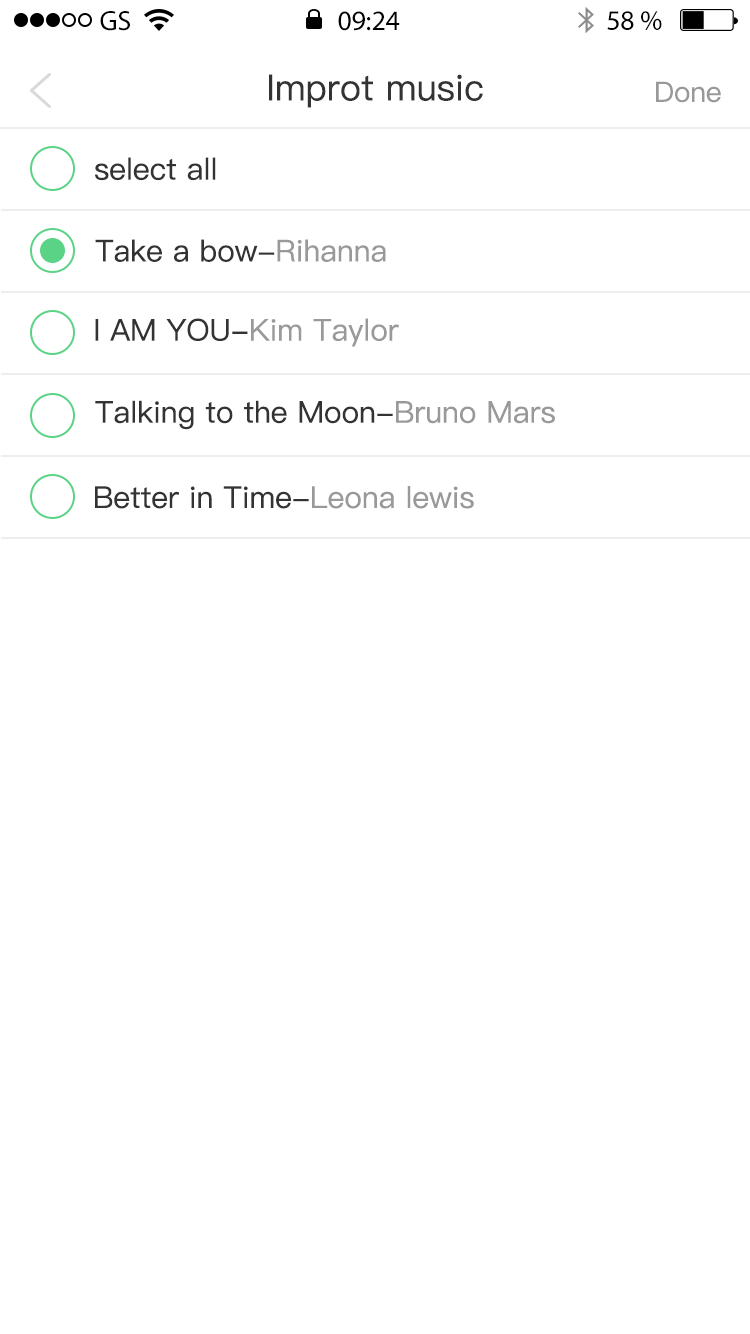
<style>
.page{position:relative;width:750px;height:1334px;background:#ffffff}
.page>*{position:absolute;margin:0}
.t1{font:28px "MyriadPro-Regular";color:#010101}
.t2{font:28px "MyriadPro-Regular";color:#000000}
.t3{font:36px "PingFangSC-Regular";color:#333333}
.t4{font:36px "PingFangSC-Regular";color:#333333;text-transform:uppercase}
.t5{font:28px "PingFangSC-Regular";color:#999999}
.t6{font:28px "PingFangSC-Regular";color:#999999;text-transform:uppercase}
.t7{font:30px "PingFangSC-Regular";color:#333333}
.t8{font:30px "PingFangSC-Regular";color:#333333;text-transform:uppercase}
.t9{font:30px "PingFangSC-Regular";color:#999999;text-transform:uppercase}
.t10{font:30px "PingFangSC-Regular";color:#999999}
</style>
<div class="page">
<p class="t1" style="left:100px;top:11px;width:30px;height:20px">GS</p>
<p class="t2" style="left:338px;top:11px;width:62px;height:20px">09:24</p>
<p class="t1" style="left:607px;top:11px;width:55px;height:19px">58 %</p>
<p class="t3" style="left:269px;top:74px;width:214px;height:34px"><span class="t4">i</span>mprot music</p>
<p class="t5" style="left:656px;top:81px;width:65px;height:22px"><span class="t6">d</span>one</p>
<p class="t7" style="left:95px;top:157px;width:121px;height:24px">select all</p>
<p class="t7" style="left:95px;top:239px;width:291px;height:23px"><span class="t8">t</span>ake a bow-<span class="t9">r</span><span class="t10">ihanna</span></p>
<p class="t8" style="left:95px;top:318px;width:304px;height:29px">i am you-<span class="t9">k</span><span class="t10">im </span><span class="t9">t</span><span class="t10">aylor</span></p>
<p class="t7" style="left:95px;top:400px;width:460px;height:30px"><span class="t8">t</span>alking to the <span class="t8">m</span>oon-<span class="t9">b</span><span class="t10">runo </span><span class="t9">m</span><span class="t10">ars</span></p>
<p class="t10" style="left:95px;top:486px;width:379px;height:23px"><span class="t8">b</span><span class="t7">etter in </span><span class="t8">t</span><span class="t7">ime-</span><span class="t9">l</span>eona lewis</p>
</div>
